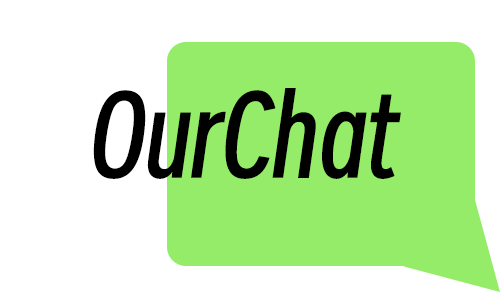
<style>
.page{position:relative;width:500px;height:292px;background:#ffffff}
.page>*{position:absolute;margin:0}
.t1{font:106.7px "SmileySans-Oblique";color:#000000}
</style>
<div class="page">
<p class="t1" style="left:93px;top:88px;width:308px;height:91px">OurChat</p>
</div>
